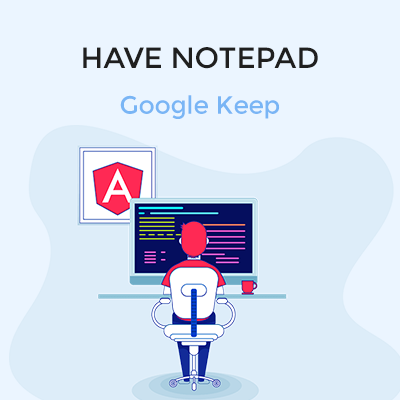
<style>
.page{position:relative;width:400px;height:400px;background:#ebf5ff}
.page>*{position:absolute;margin:0}
.t1{font:29.2px/45.8px "Montserrat-Regular";color:#1f1f1f}
.t2{font:25px/45.8px "Montserrat-Regular";color:#79b5f5}
</style>
<div class="page">
<p class="t1" style="left:83px;top:47px;width:235px;height:72px;text-align:center">HAVE NOTEPAD<br><span class="t2">Google Keep</span></p>
</div>
